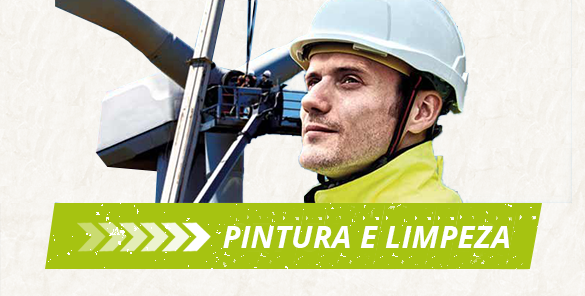
<style>
.page{position:relative;width:585px;height:296px}
.page>*{position:absolute;margin:0}
.t1{font:31.5px "OpenSans-BoldItalic";color:#ffffff;text-transform:uppercase}
</style>
<div class="page">
<p class="t1" style="left:223px;top:226px;width:287px;height:22px">PINTURA E LIMPEZA</p>
</div>
